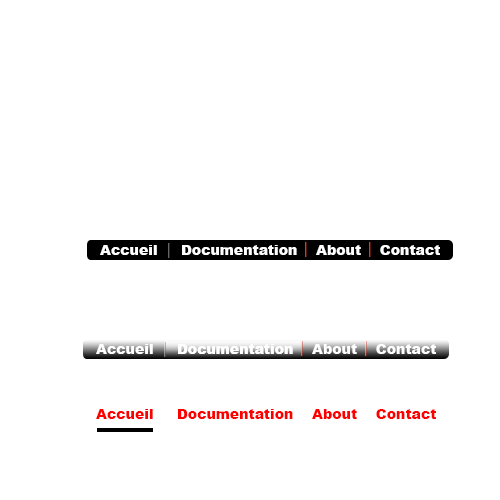
<style>
.page{position:relative;width:500px;height:500px;background:#ffffff}
.page>*{position:absolute;margin:0}
.t1{font:14px "Arial-Black";color:#ffffff}
.t2{font:14px "Arial-Black";color:#ff0000}
</style>
<div class="page">
<p class="t1" style="left:100px;top:245px;width:340px;height:10px">Accueil     Documentation    About    Contact</p>
<p class="t1" style="left:96px;top:344px;width:340px;height:10px">Accueil     Documentation    About    Contact</p>
<p class="t2" style="left:96px;top:409px;width:340px;height:10px">Accueil     Documentation    About    Contact</p>
</div>
